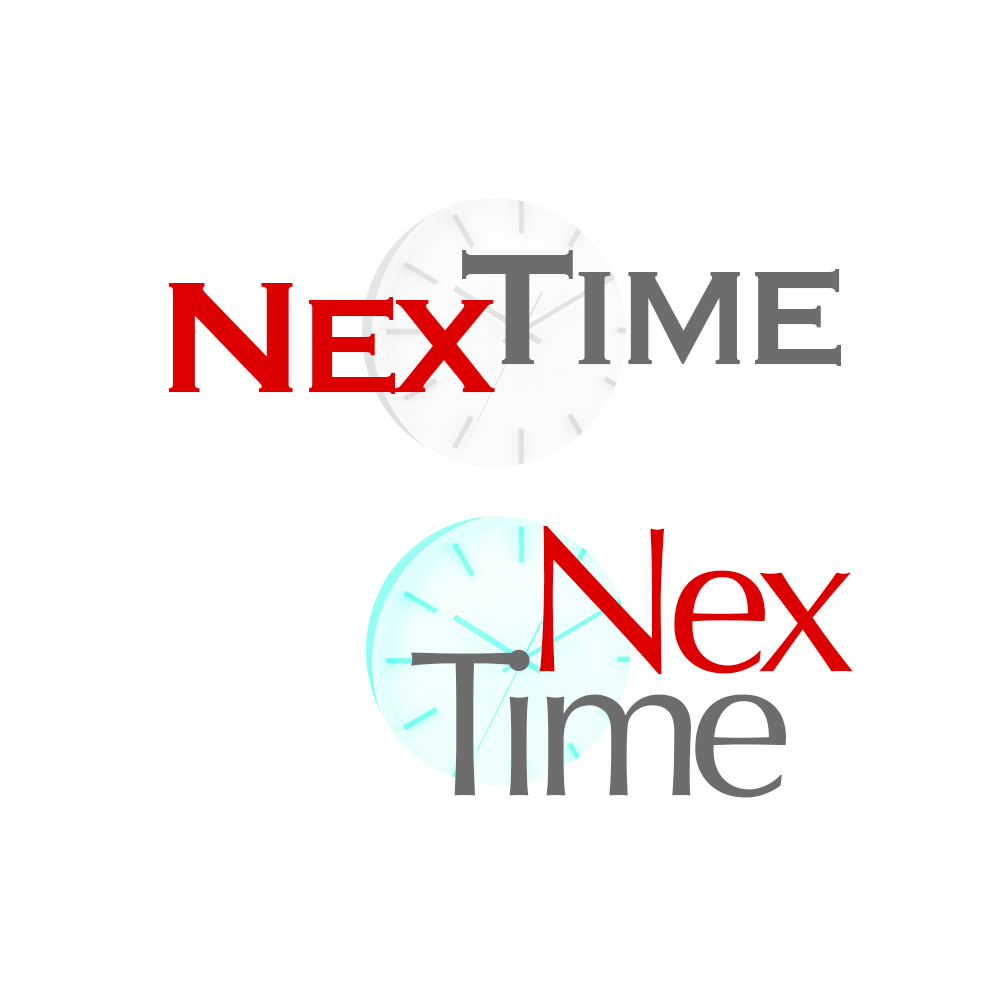
<style>
.page{position:relative;width:1000px;height:1000px;background:#ffffff}
.page>*{position:absolute;margin:0}
.t1{font:208.3px "Copperplate";letter-spacing:-0.1em;color:#6d6d6d}
.t2{font:208.3px "Copperplate";letter-spacing:-0.1em;color:#dd0000}
.t3{font:208.3px "Optima-Regular";letter-spacing:-0.08em;color:#dd0000}
.t4{font:208.3px "Optima-Regular";letter-spacing:-0.08em;color:#6d6d6d}
</style>
<div class="page">
<p class="t1" style="left:462px;top:250px;width:379px;height:116px">Time</p>
<p class="t2" style="left:168px;top:283px;width:327px;height:111px">Nex</p>
<p class="t3" style="left:539px;top:525px;width:314px;height:150px">Nex</p>
<p class="t4" style="left:411px;top:649px;width:375px;height:149px">Time</p>
</div>
